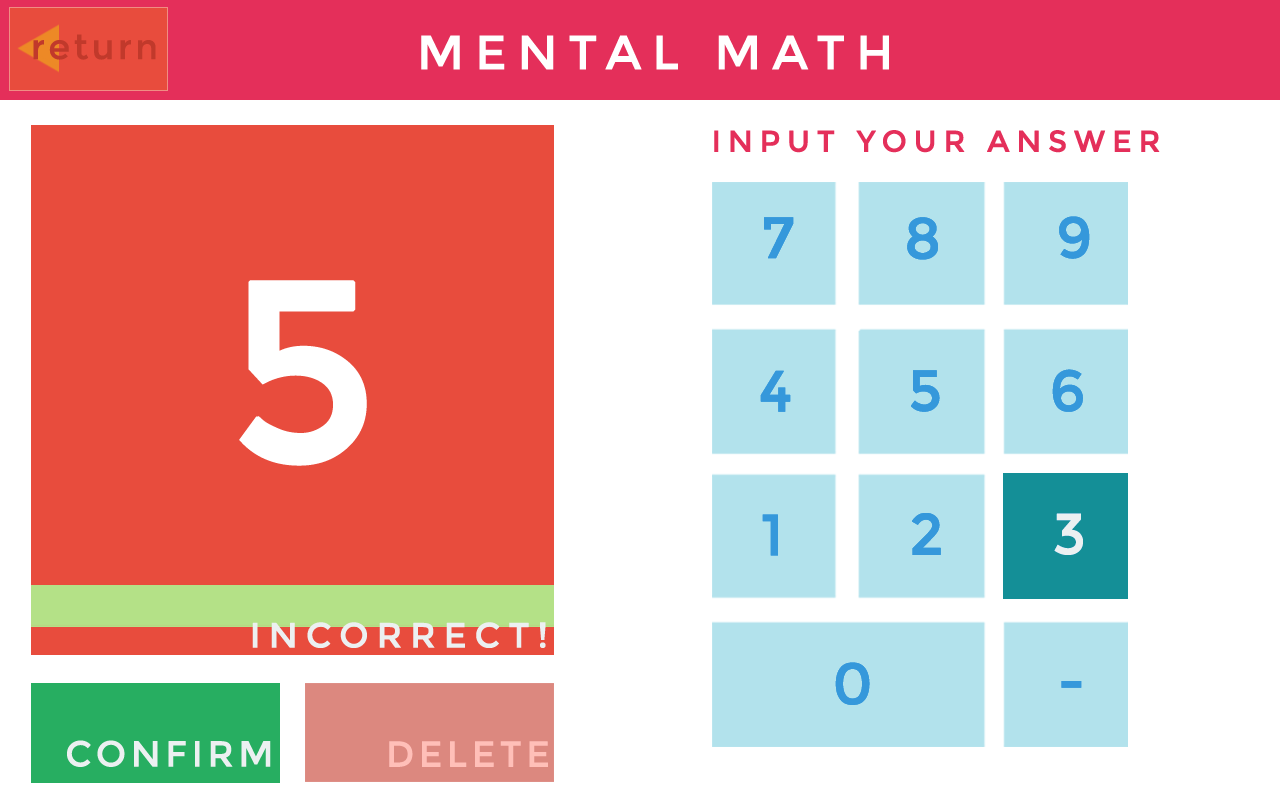
<style>
.page{position:relative;width:1280px;height:800px;background:#ffffff}
.page>*{position:absolute;margin:0}
.t1{font:35px "Montserrat-Regular";letter-spacing:0.075em;color:#c1392b;font-weight:bold}
.t2{font:48px "Montserrat-Regular";letter-spacing:0.2em;color:#ffffff;text-transform:uppercase;font-weight:bold}
.t3{font:30px "Montserrat-Regular";letter-spacing:0.2em;color:#e42f5a;text-transform:uppercase;font-weight:bold}
.t4{font:57.6px "Montserrat-Regular";letter-spacing:0.2em;color:#3598db;text-transform:uppercase;font-weight:bold}
.t5{font:256.5px "Montserrat-Regular";letter-spacing:0.2em;color:#ffffff;text-transform:uppercase;font-weight:bold}
.t6{font:57.6px "Montserrat-Regular";letter-spacing:0.2em;color:#ecf0f1;text-transform:uppercase;font-weight:bold}
.t7{font:35.1px "Montserrat-Regular";letter-spacing:0.2em;color:#ecf0f1;text-transform:uppercase;font-weight:bold}
.t8{font:36px "Montserrat-Regular";letter-spacing:0.1em;color:#ecf0f1;text-transform:uppercase;font-weight:bold}
.t9{font:36px "Montserrat-Regular";letter-spacing:0.1em;color:#ffbfb8;text-transform:uppercase;font-weight:bold}
</style>
<div class="page">
<p class="t1" style="left:33px;top:34px;width:123px;height:26px">return</p>
<p class="t2" style="left:421px;top:35px;width:468px;height:35px">Mental Math</p>
<p class="t3" style="left:714px;top:130px;width:446px;height:23px">Input your Answer</p>
<p class="t4" style="left:764px;top:217px;width:30px;height:42px">7</p>
<p class="t4" style="left:907px;top:217px;width:31px;height:43px">8</p>
<p class="t4" style="left:1059px;top:216px;width:31px;height:43px">9</p>
<p class="t5" style="left:239px;top:280px;width:128px;height:186px">5</p>
<p class="t4" style="left:760px;top:370px;width:31px;height:42px">4</p>
<p class="t4" style="left:911px;top:370px;width:29px;height:42px">5</p>
<p class="t4" style="left:1052px;top:369px;width:31px;height:43px">6</p>
<p class="t4" style="left:762px;top:514px;width:16px;height:42px">1</p>
<p class="t4" style="left:912px;top:513px;width:29px;height:42px">2</p>
<p class="t6" style="left:1054px;top:513px;width:29px;height:42px">3</p>
<p class="t7" style="left:252px;top:622px;width:294px;height:26px">Incorrect!</p>
<p class="t4" style="left:835px;top:662px;width:35px;height:43px">0</p>
<p class="t4" style="left:1061px;top:681px;width:21px;height:7px">-</p>
<p class="t8" style="left:67px;top:740px;width:204px;height:27px">Confirm</p>
<p class="t9" style="left:389px;top:741px;width:159px;height:26px">Delete</p>
</div>
